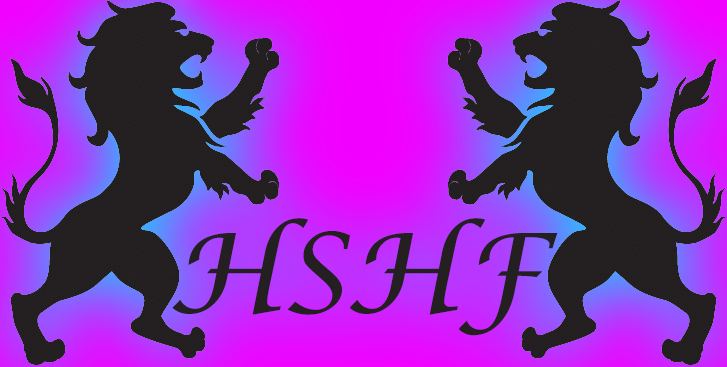
<style>
.page{position:relative;width:727px;height:367px}
.page>*{position:absolute;margin:0}
.t1{font:110px "LucidaCalligraphy-Italic";color:#242021;text-transform:uppercase}
</style>
<div class="page">
<p class="t1" style="left:172px;top:218px;width:386px;height:118px">HSHF</p>
</div>
